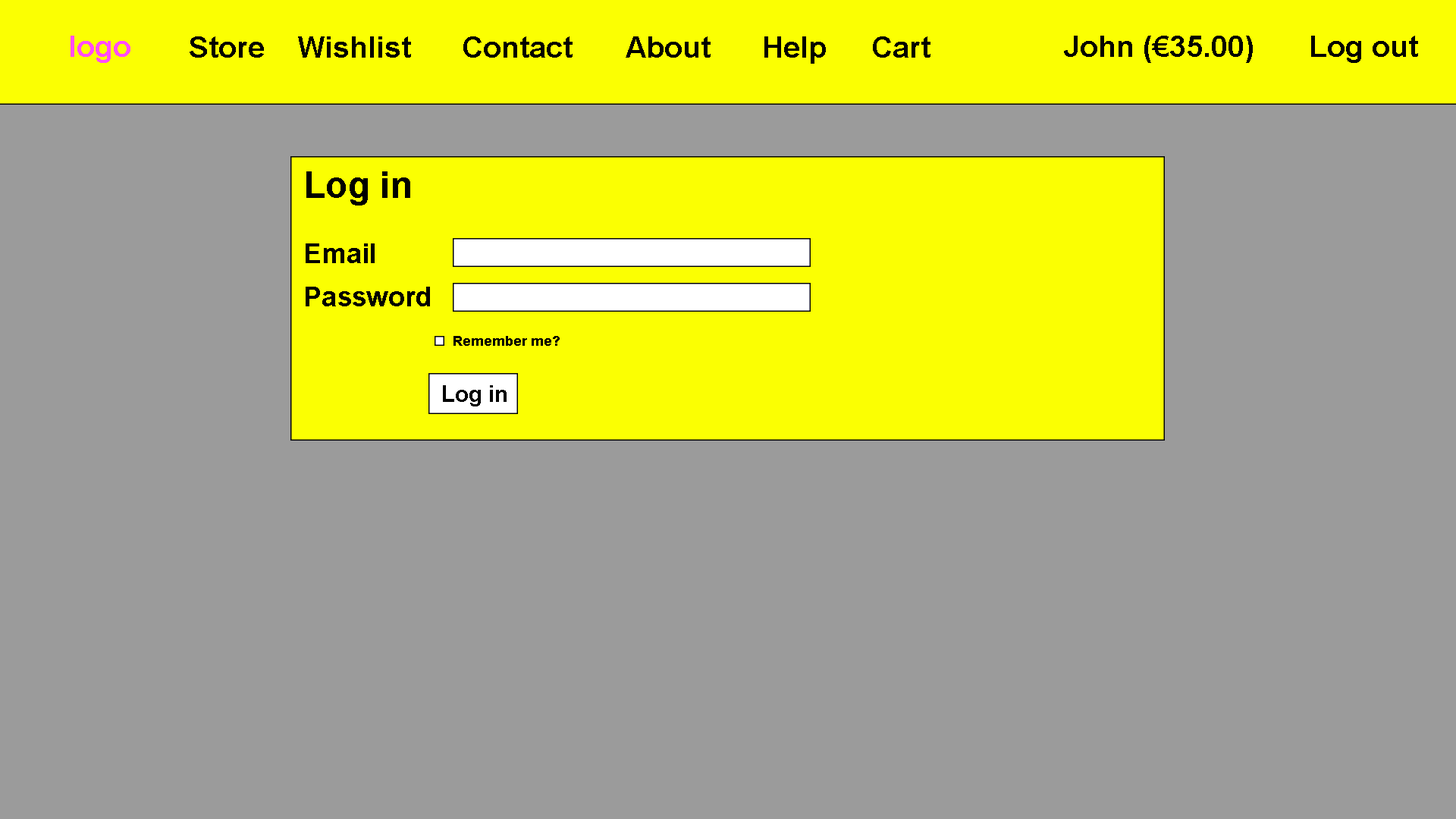
<style>
.page{position:relative;width:1456px;height:819px;background:#9b9b9b}
.page>*{position:absolute;margin:0}
.t1{font:29.6px "Arial-BoldMT";color:#ff4cff}
.t2{font:29.6px "Arial-BoldMT";color:#000000}
.t3{font:29.6px "Arial-BoldMT";color:#010101}
.t4{font:36.4px "Arial-BoldMT";color:#000000}
.t5{font:27.3px "Arial-BoldMT";color:#000000}
.t6{font:13.6px "Arial-BoldMT";color:#000000}
.t7{font:22.7px "Arial-BoldMT";color:#000000}
</style>
<div class="page">
<p class="t1" style="left:71px;top:36px;width:59px;height:27px">logo</p>
<p class="t2" style="left:190px;top:36px;width:740px;height:28px">Store  Wishlist  Contact  About  Help  Cart</p>
<p class="t3" style="left:1064px;top:36px;width:354px;height:27px">John (€35.00)  Log out</p>
<p class="t4" style="left:306px;top:171px;width:104px;height:92px">Log in<br><span class="t5"><br>Email</span></p>
<p class="t5" style="left:306px;top:287px;width:124px;height:19px">Password</p>
<p class="t6" style="left:453px;top:336px;width:107px;height:10px">Remember me?</p>
<p class="t7" style="left:443px;top:385px;width:64px;height:21px">Log in</p>
</div>
